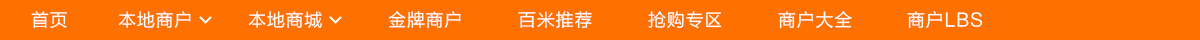
<style>
.page{position:relative;width:1200px;height:40px;background:#fe7000}
.page>*{position:absolute;margin:0}
.t1{font:18px "FZLTHK--GBK1-0";letter-spacing:0.04em;color:#ffffff}
</style>
<div class="page">
<p class="t1" style="left:31px;top:11px;width:36px;height:18px">首页</p>
<p class="t1" style="left:118px;top:11px;width:73px;height:17px">本地商户</p>
<p class="t1" style="left:248px;top:11px;width:74px;height:17px">本地商城</p>
<p class="t1" style="left:388px;top:11px;width:73px;height:17px">金牌商户</p>
<p class="t1" style="left:518px;top:11px;width:74px;height:18px">百米推荐</p>
<p class="t1" style="left:648px;top:11px;width:74px;height:18px">抢购专区</p>
<p class="t1" style="left:778px;top:11px;width:74px;height:18px">商户大全</p>
<p class="t1" style="left:907px;top:11px;width:76px;height:18px">商户LBS</p>
</div>
